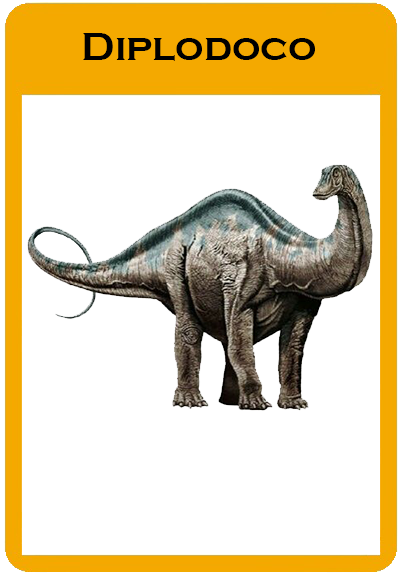
<style>
.page{position:relative;width:400px;height:575px;background:#ffffff}
.page>*{position:absolute;margin:0}
.t1{font:40px "CopperplateGothic-Bold";color:#000000}
</style>
<div class="page">
<p class="t1" style="left:83px;top:33px;width:232px;height:28px">Diplodoco</p>
</div>
